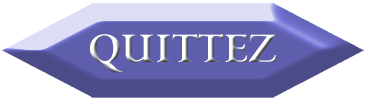
<style>
.page{position:relative;width:366px;height:100px;background:#ffffff}
.page>*{position:absolute;margin:0}
.t1{font:46.8px "Perpetua-Bold"}
</style>
<div class="page">
<p class="t1" style="left:90px;top:34px;width:186px;height:39px">QUITTEZ</p>
</div>
